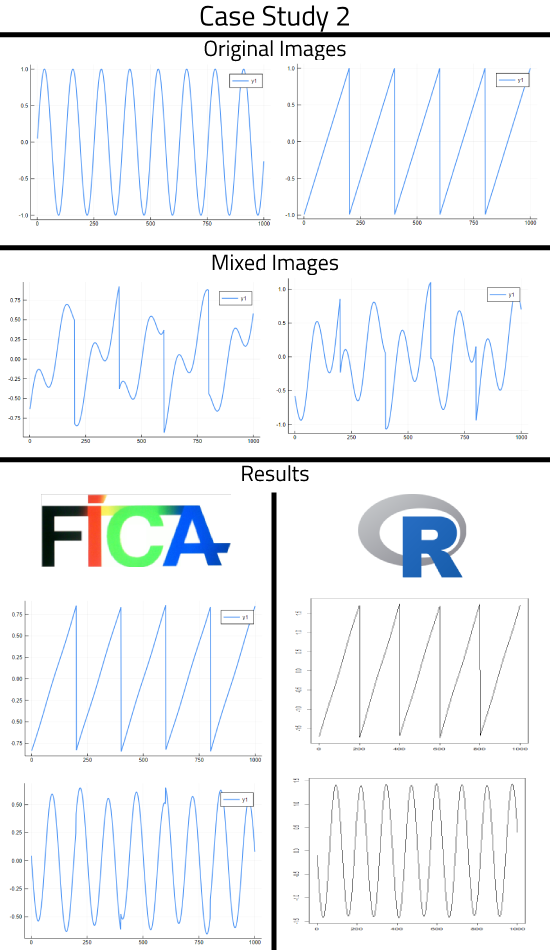
<style>
.page{position:relative;width:550px;height:950px;background:#ffffff}
.page>*{position:absolute;margin:0}
.t1{font:28px "Cairo-Regular";color:#000000}
.t2{font:22px "Cairo-Regular";color:#000000}
</style>
<div class="page">
<p class="t1" style="left:200px;top:5px;width:150px;height:27px">Case Study 2</p>
<p class="t2" style="left:204px;top:40px;width:142px;height:22px">Original Images</p>
<p class="t2" style="left:212px;top:254px;width:127px;height:22px">Mixed Images</p>
<p class="t2" style="left:242px;top:465px;width:67px;height:17px">Results</p>
</div>
